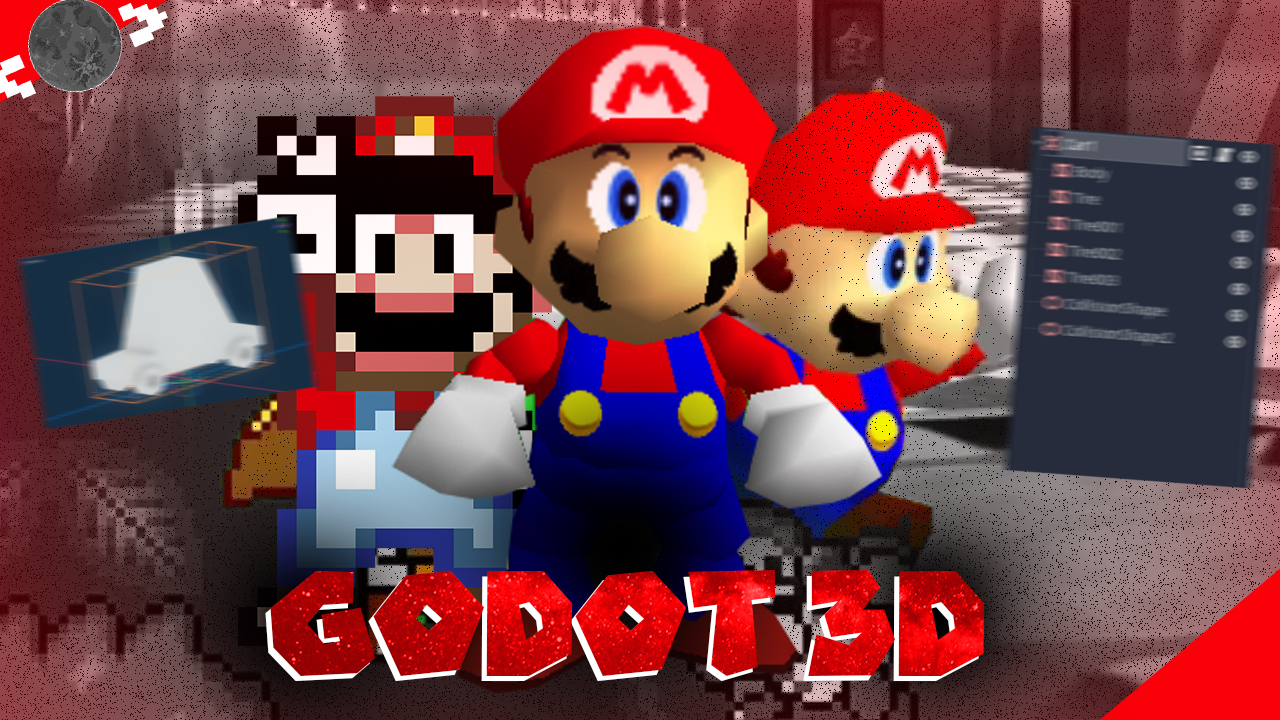
<style>
.page{position:relative;width:1280px;height:720px}
.page>*{position:absolute;margin:0}
.t1{font:150px "RetroMario-Regular"}
</style>
<div class="page">
<p class="t1" style="left:265px;top:575px;width:715px;height:106px">GODOT 3D</p>
<p class="t1" style="left:270px;top:570px;width:715px;height:106px">GODOT 3D</p>
</div>
